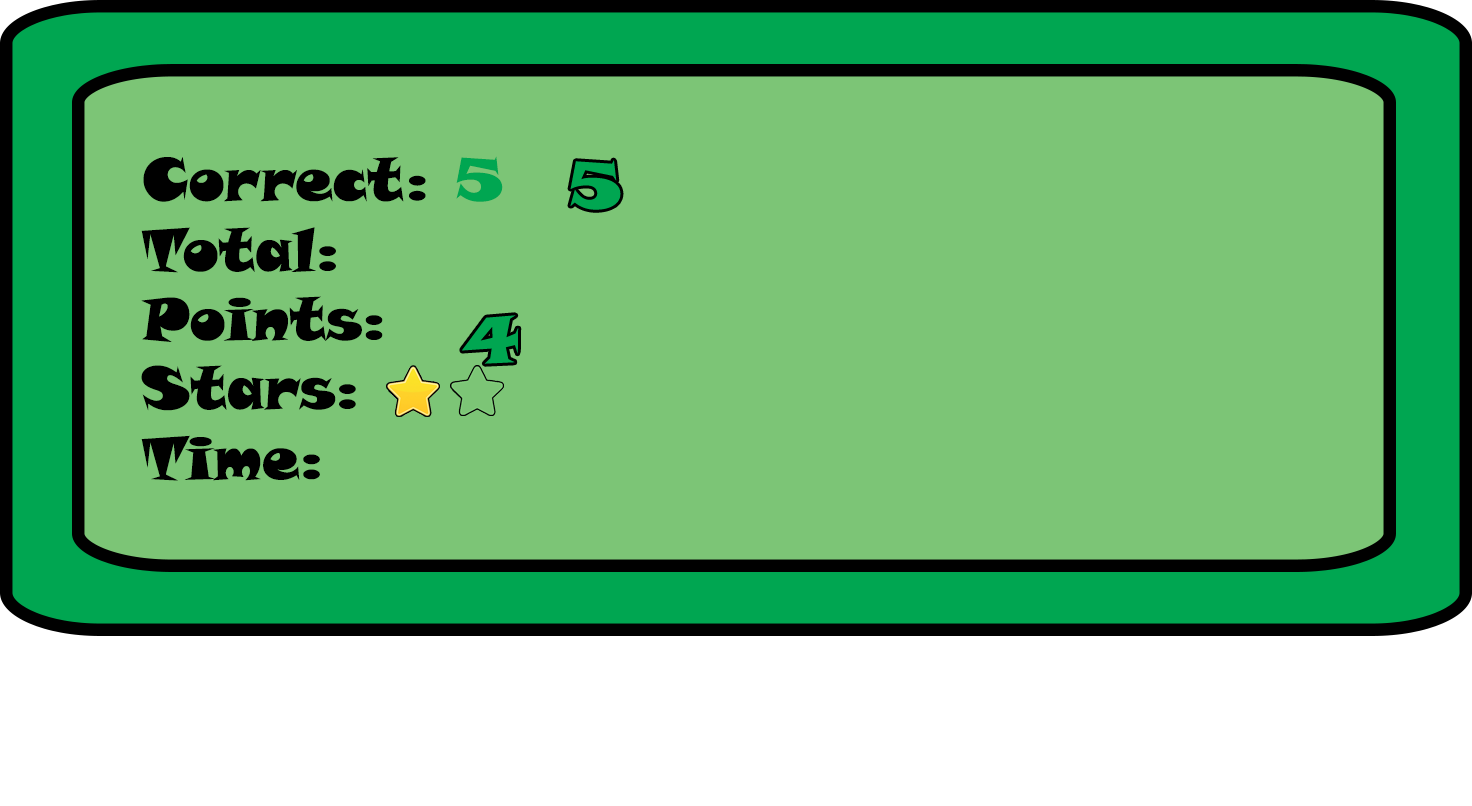
<style>
.page{position:relative;width:1472px;height:806px;background:#7cc576}
.page>*{position:absolute;margin:0}
.t1{font:59.4px "SnapITC-Regular";color:#000000}
.t2{font:59.4px "SnapITC-Regular";color:#00a651}
</style>
<div class="page">
<p class="t1" style="left:143px;top:156px;width:360px;height:46px">Correct: <span class="t2">5</span></p>
<p class="t1" style="left:141px;top:227px;width:195px;height:46px">Total:</p>
<p class="t1" style="left:141px;top:296px;width:242px;height:46px">Points:</p>
<p class="t1" style="left:141px;top:365px;width:215px;height:46px">Stars:</p>
<p class="t1" style="left:141px;top:435px;width:179px;height:46px">Time:</p>
</div>
